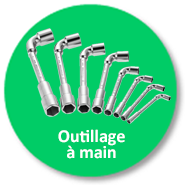
<style>
.page{position:relative;width:185px;height:185px;background:#00cc66}
.page>*{position:absolute;margin:0}
.t1{font:18px/16px "Calibri-Bold";color:#ffffff}
</style>
<div class="page">
<p class="t1" style="left:58px;top:129px;width:67px;height:30px;text-align:center">Outillage   <br>à main</p>
</div>
